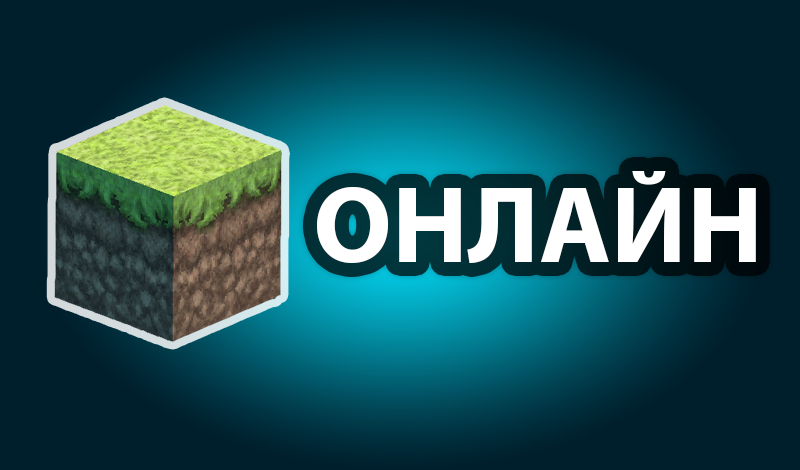
<style>
.page{position:relative;width:800px;height:470px;background:#001f2c}
.page>*{position:absolute;margin:0}
.t1{font:110px "MyriadPro-Bold";color:#ffffff}
</style>
<div class="page">
<p class="t1" style="left:317px;top:171px;width:439px;height:92px">ОНЛАЙН</p>
</div>
